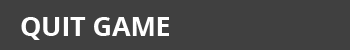
<style>
.page{position:relative;width:350px;height:50px;background:#404040}
.page>*{position:absolute;margin:0}
.t1{font:26.7px "OpenSans-Bold";color:#ffffff}
</style>
<div class="page">
<p class="t1" style="left:21px;top:17px;width:148px;height:23px">QUIT GAME</p>
</div>
